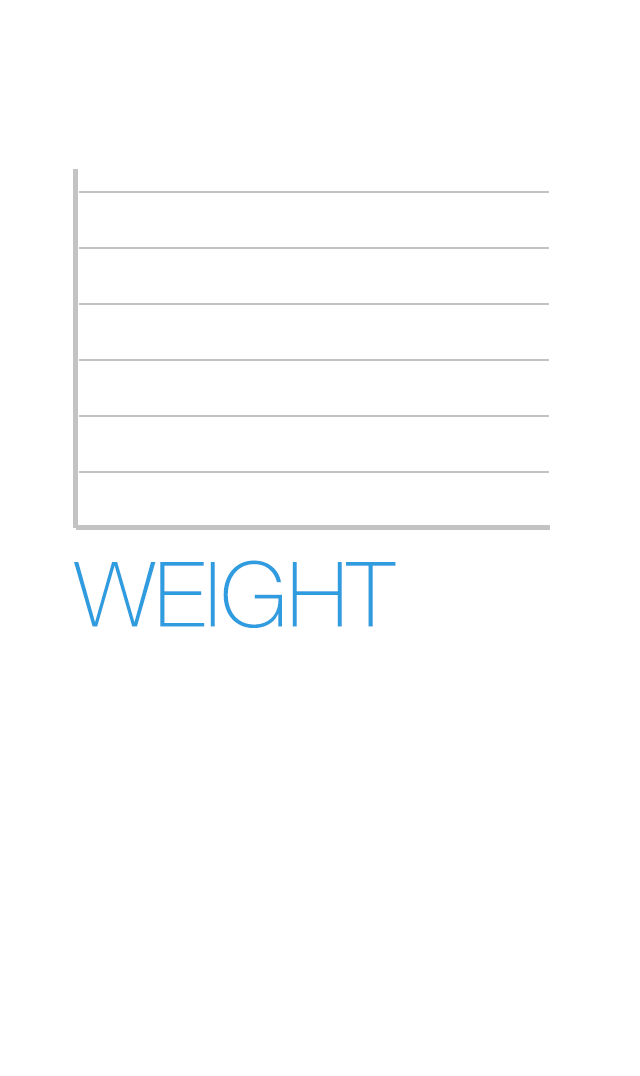
<style>
.page{position:relative;width:640px;height:1076px;background:#ffffff}
.page>*{position:absolute;margin:0}
.t1{font:90px "HelveticaNeue-Thin";color:#2e9cdf}
</style>
<div class="page">
<p class="t1" style="left:74px;top:560px;width:322px;height:68px">WEIGHT</p>
</div>
